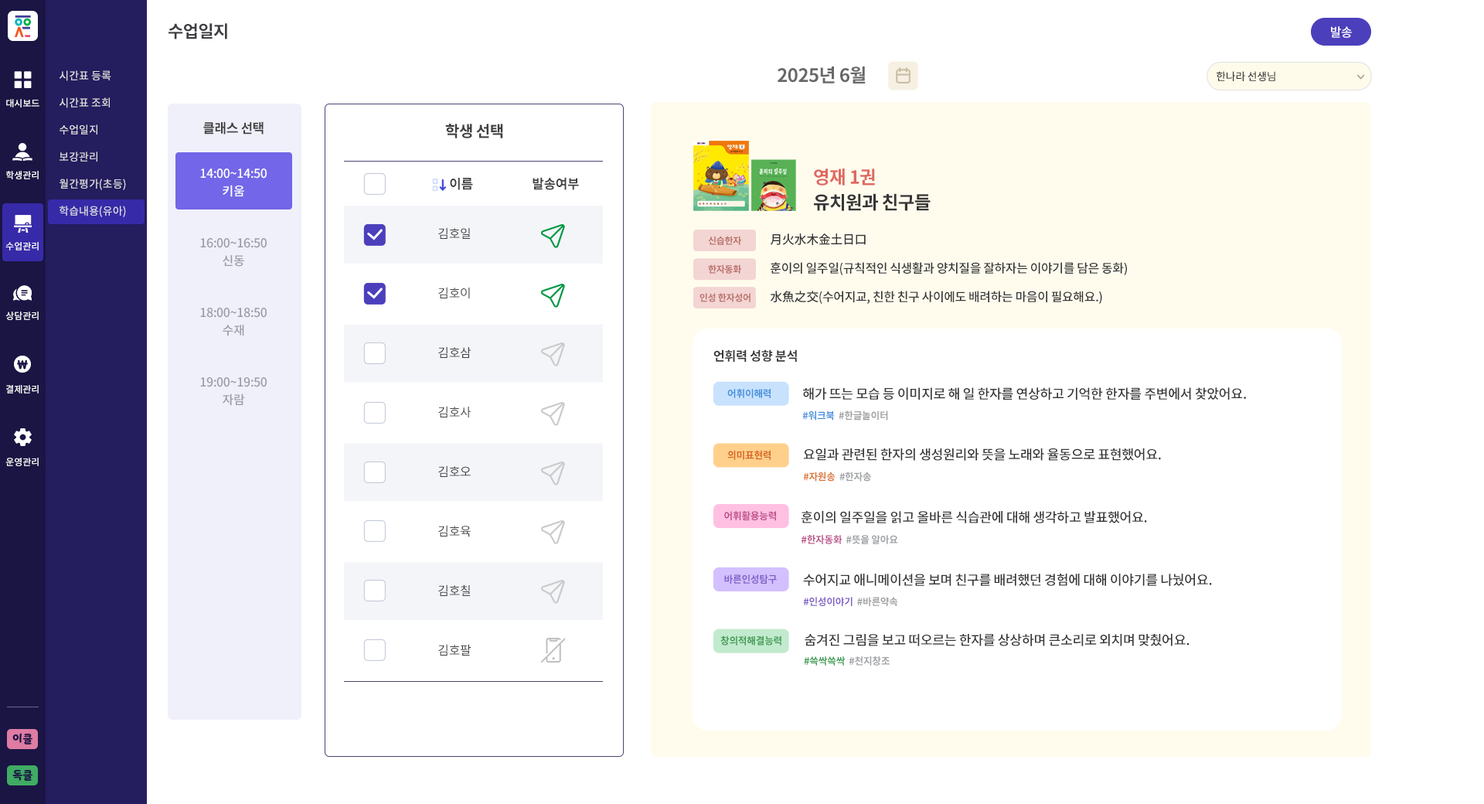
<style>
.page{position:relative;width:1484px;height:804px;background:#ffffff}
.page>*{position:absolute;margin:0}
.t1{font:17px "NotoSansCJKkr-Bold";letter-spacing:-0.025em;color:#3e3e43;text-transform:uppercase}
.t2{font:12.4px "NotoSansCJKkr-Medium";letter-spacing:-0.025em;color:#ffffff}
.t3{font:10.8px/27px "NotoSansCJKkr-Medium";color:#e1e1e1}
.t4{font:18.5px "NotoSansCJKkr-Bold";letter-spacing:-0.025em;color:#686868}
.t5{font:10.8px "NotoSansCJKkr-Medium";letter-spacing:-0.025em;color:#323232}
.t6{font:9.3px "NotoSansCJKkr-Medium";color:#ffffff}
.t7{font:13.1px "NotoSansCJKkr-Bold";letter-spacing:-0.025em;color:#404040}
.t8{font:15.5px "NotoSansCJKkr-Bold";letter-spacing:-0.025em;color:#404040}
.t9{font:12.4px/69.5px "NotoSansCJKkr-Medium";letter-spacing:-0.025em;color:#9b9ba8}
.t10{font:12.4px/69.5px "NotoSansCJKkr-Medium";letter-spacing:-0.025em;color:#ffffff}
.t11{font:18.1px/25.3px "NotoSansCJKkr-Bold";letter-spacing:-0.025em;color:#363636}
.t12{font:18.1px/25.3px "NotoSansCJKkr-Bold";letter-spacing:-0.025em;color:#df6961}
.t13{font:12.4px/59.5px "NotoSansCJKkr-Regular";letter-spacing:-0.025em;color:#404040}
.t14{font:12.4px/19.2px "NotoSansCJKkr-Medium";letter-spacing:-0.025em;color:#363636}
.t15{font:9.3px "NotoSansCJKkr-Bold";letter-spacing:-0.025em;color:#ba6f6a}
.t16{font:12.7px "NotoSansCJKkr-Bold";letter-spacing:-0.025em;color:#363636}
.t17{font:9.9px "NotoSansCJKkr-Bold";letter-spacing:-0.025em;color:#438edd}
.t18{font:13.4px "NotoSansCJKkr-Medium";letter-spacing:-0.025em;color:#363636}
.t19{font:9.9px "NotoSansCJKkr-Bold";letter-spacing:-0.025em;color:#9d9fa2}
.t20{font:9.9px "NotoSansCJKkr-Bold";letter-spacing:-0.025em;color:#d7631e}
.t21{font:9.9px "NotoSansCJKkr-Bold";letter-spacing:-0.025em;color:#dc7432}
.t22{font:9.9px "NotoSansCJKkr-Bold";letter-spacing:-0.025em;color:#ba4d88}
.t23{font:9.9px "NotoSansCJKkr-Bold";letter-spacing:-0.025em;color:#7f60c6}
.t24{font:9.9px "NotoSansCJKkr-Bold";letter-spacing:-0.025em;color:#3b9a4f}
.t25{font:10.8px "YoonSoftSlime";color:#1a1543}
</style>
<div class="page">
<p class="t1" style="left:168px;top:23px;width:59px;height:16px">수업일지</p>
<p class="t2" style="left:1331px;top:26px;width:21px;height:12px">발송</p>
<p class="t3" style="left:60px;top:70px;width:66px;height:147px">시간표 등록<br>시간표 조회<br>수업일지<br>보강관리<br>월간평가(초등)<br>학습내용(유아)</p>
<p class="t4" style="left:777px;top:66px;width:89px;height:17px">2025년 6월</p>
<p class="t5" style="left:1216px;top:71px;width:59px;height:10px">한나라 선생님</p>
<p class="t6" style="left:6px;top:99px;width:33px;height:8px">대시보드</p>
<p class="t7" style="left:203px;top:121px;width:61px;height:13px">클래스 선택</p>
<p class="t8" style="left:445px;top:124px;width:58px;height:14px">학생 선택</p>
<p class="t6" style="left:6px;top:171px;width:33px;height:8px">학생관리</p>
<p class="t9" style="left:200px;top:168px;width:67px;height:219px;text-align:center"><span class="t10">14:00~14:50<br></span>16:00~16:50<br>18:00~18:50<br>19:00~19:50</p>
<p class="t11" style="left:814px;top:168px;width:116px;height:43px"><span class="t12">영재 1권<br></span>유치원과 친구들</p>
<p class="t9" style="left:223px;top:185px;width:22px;height:221px;text-align:center"><span class="t10">키움<br></span>신동<br>수재<br>자람</p>
<p class="t7" style="left:450px;top:178px;width:23px;height:12px">이름</p>
<p class="t7" style="left:532px;top:177px;width:47px;height:13px">발송여부</p>
<p class="t13" style="left:438px;top:227px;width:33px;height:428px">김호일<br>김호이<br>김호삼<br>김호사<br>김호오<br>김호육<br>김호칠<br>김호팔</p>
<p class="t14" style="left:770px;top:233px;width:357px;height:71px">月火水木金土日口<br> <br>훈이의 일주일(규칙적인 식생활과 양치질을 잘하자는 이야기를 담은 동화)<br> <br>水魚之交(수어지교, 친한 친구 사이에도 배려하는 마음이 필요해요.)</p>
<p class="t6" style="left:5px;top:242px;width:34px;height:8px">수업관리</p>
<p class="t15" style="left:708px;top:236px;width:33px;height:9px">신습한자</p>
<p class="t15" style="left:708px;top:264px;width:33px;height:10px">한자동화</p>
<p class="t15" style="left:699px;top:293px;width:51px;height:9px">인성 한자성어</p>
<p class="t6" style="left:5px;top:311px;width:34px;height:9px">상담관리</p>
<p class="t16" style="left:713px;top:349px;width:84px;height:13px">언휘력 성향 분석</p>
<p class="t6" style="left:6px;top:385px;width:33px;height:8px">결제관리</p>
<p class="t17" style="left:727px;top:389px;width:43px;height:9px">어휘이해력</p>
<p class="t18" style="left:803px;top:387px;width:443px;height:13px">해가 뜨는 모습 등 이미지로 해 일 한자를 연상하고 기억한 한자를 주변에서 찾았어요.</p>
<p class="t19" style="left:802px;top:410px;width:86px;height:10px"><span class="t17">#워크북  </span>#한글놀이터</p>
<p class="t20" style="left:727px;top:450px;width:43px;height:10px">의미표현력</p>
<p class="t18" style="left:803px;top:447px;width:358px;height:14px">요일과 관련된 한자의 생성원리와 뜻을 노래와 율동으로 표현했어요.</p>
<p class="t6" style="left:5px;top:457px;width:34px;height:9px">운영관리</p>
<p class="t21" style="left:803px;top:471px;width:68px;height:10px">#자원송  <span class="t19">#한자송</span></p>
<p class="t22" style="left:724px;top:511px;width:52px;height:10px">어휘활용능력</p>
<p class="t18" style="left:801px;top:511px;width:346px;height:12px">훈이의 일주일을 읽고 올바른 식습관에 대해 생각하고 발표했어요.</p>
<p class="t19" style="left:801px;top:535px;width:97px;height:9px"><span class="t22">#한자동화  </span>#뜻을 알아요</p>
<p class="t23" style="left:724px;top:574px;width:53px;height:9px">바른인성탐구</p>
<p class="t18" style="left:803px;top:573px;width:409px;height:13px">수어지교 애니메이션을 보며 친구를 배려했던 경험에 대해 이야기를 나눴어요.</p>
<p class="t23" style="left:803px;top:597px;width:95px;height:9px">#인성이야기  <span class="t19">#바른약속</span></p>
<p class="t24" style="left:720px;top:635px;width:61px;height:10px">창의적해결능력</p>
<p class="t18" style="left:804px;top:633px;width:385px;height:13px">숨겨진 그림을 보고 떠오르는 한자를 상상하며 큰소리로 외치며 맞췄어요.</p>
<p class="t24" style="left:804px;top:656px;width:85px;height:9px">#쓱싹쓱싹  <span class="t19">#천지창조</span></p>
<p class="t25" style="left:12px;top:733px;width:20px;height:11px">이클</p>
<p class="t25" style="left:12px;top:770px;width:20px;height:10px">독클</p>
</div>
